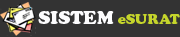
<style>
.page{position:relative;width:180px;height:37px;background:#333333}
.page>*{position:absolute;margin:0}
.t1{font:18px "CooperBlackStd";color:#fdfdfe}
.t2{font:14px "CooperBlackStd";color:#c5d52b}
</style>
<div class="page">
<p class="t1" style="left:38px;top:10px;width:142px;height:14px">SISTEM <span class="t2">eSURAT</span></p>
</div>
